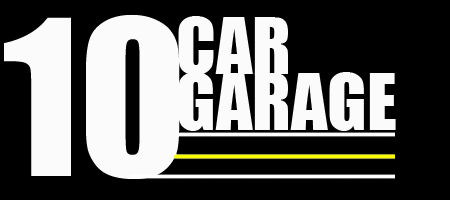
<style>
.page{position:relative;width:450px;height:200px;background:#000000}
.page>*{position:absolute;margin:0}
.t1{font:200px "Impact";color:#fbfbfb}
.t2{font:72px "Impact";color:#fbfbfb}
</style>
<div class="page">
<p class="t1" style="left:4px;top:14px;width:176px;height:165px">10</p>
<p class="t2" style="left:178px;top:16px;width:110px;height:59px">CAR</p>
<p class="t2" style="left:178px;top:72px;width:218px;height:59px">GARAGE</p>
</div>
